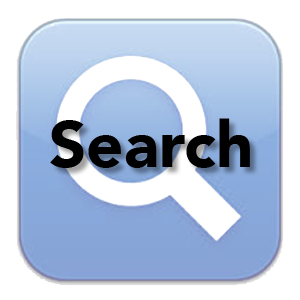
<style>
.page{position:relative;width:300px;height:300px;background:#ffffff}
.page>*{position:absolute;margin:0}
.t1{font:112px "Avenir-Black";color:#000000}
</style>
<div class="page">
<p class="t1" style="left:50px;top:118px;width:200px;height:50px">Search</p>
</div>
